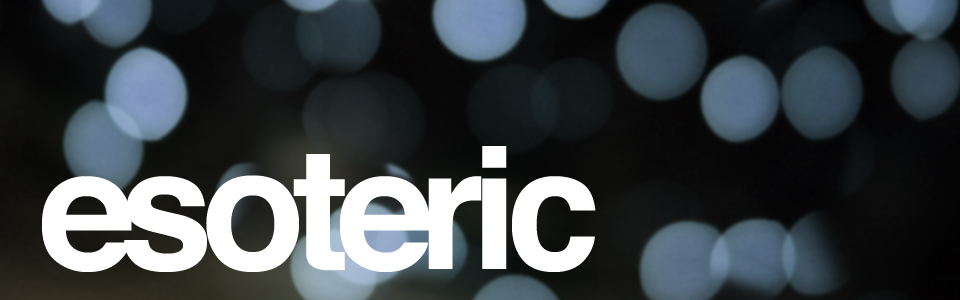
<style>
.page{position:relative;width:960px;height:300px}
.page>*{position:absolute;margin:0}
.t1{font:170px "Helvetica-Bold";letter-spacing:-0.075em;color:#ffffff}
</style>
<div class="page">
<p class="t1" style="left:42px;top:146px;width:554px;height:126px">esoteric</p>
</div>
